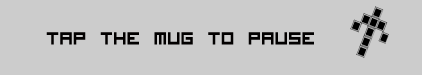
<style>
.page{position:relative;width:422px;height:75px;background:#cccccc}
.page>*{position:absolute;margin:0}
.t1{font:23.7px "VisitorTT1-BRK-";color:#020000;scale:0.95 1}
</style>
<div class="page">
<p class="t1" style="left:46px;top:32px;width:268px;height:13px">Tap the mug to pause</p>
</div>
